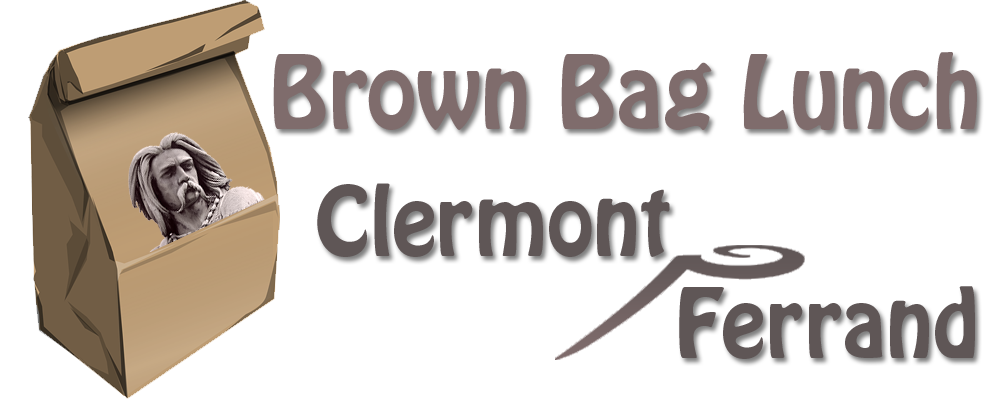
<style>
.page{position:relative;width:1000px;height:400px;background:#ffffff}
.page>*{position:absolute;margin:0}
.t1{font:90px "HoboStd";color:#7f6c6c}
.t2{font:85px "HoboStd";color:#5f5656}
</style>
<div class="page">
<p class="t1" style="left:273px;top:52px;width:704px;height:78px">Brown Bag Lunch</p>
<p class="t2" style="left:317px;top:183px;width:658px;height:176px">Clermont <br>          Ferrand</p>
</div>
